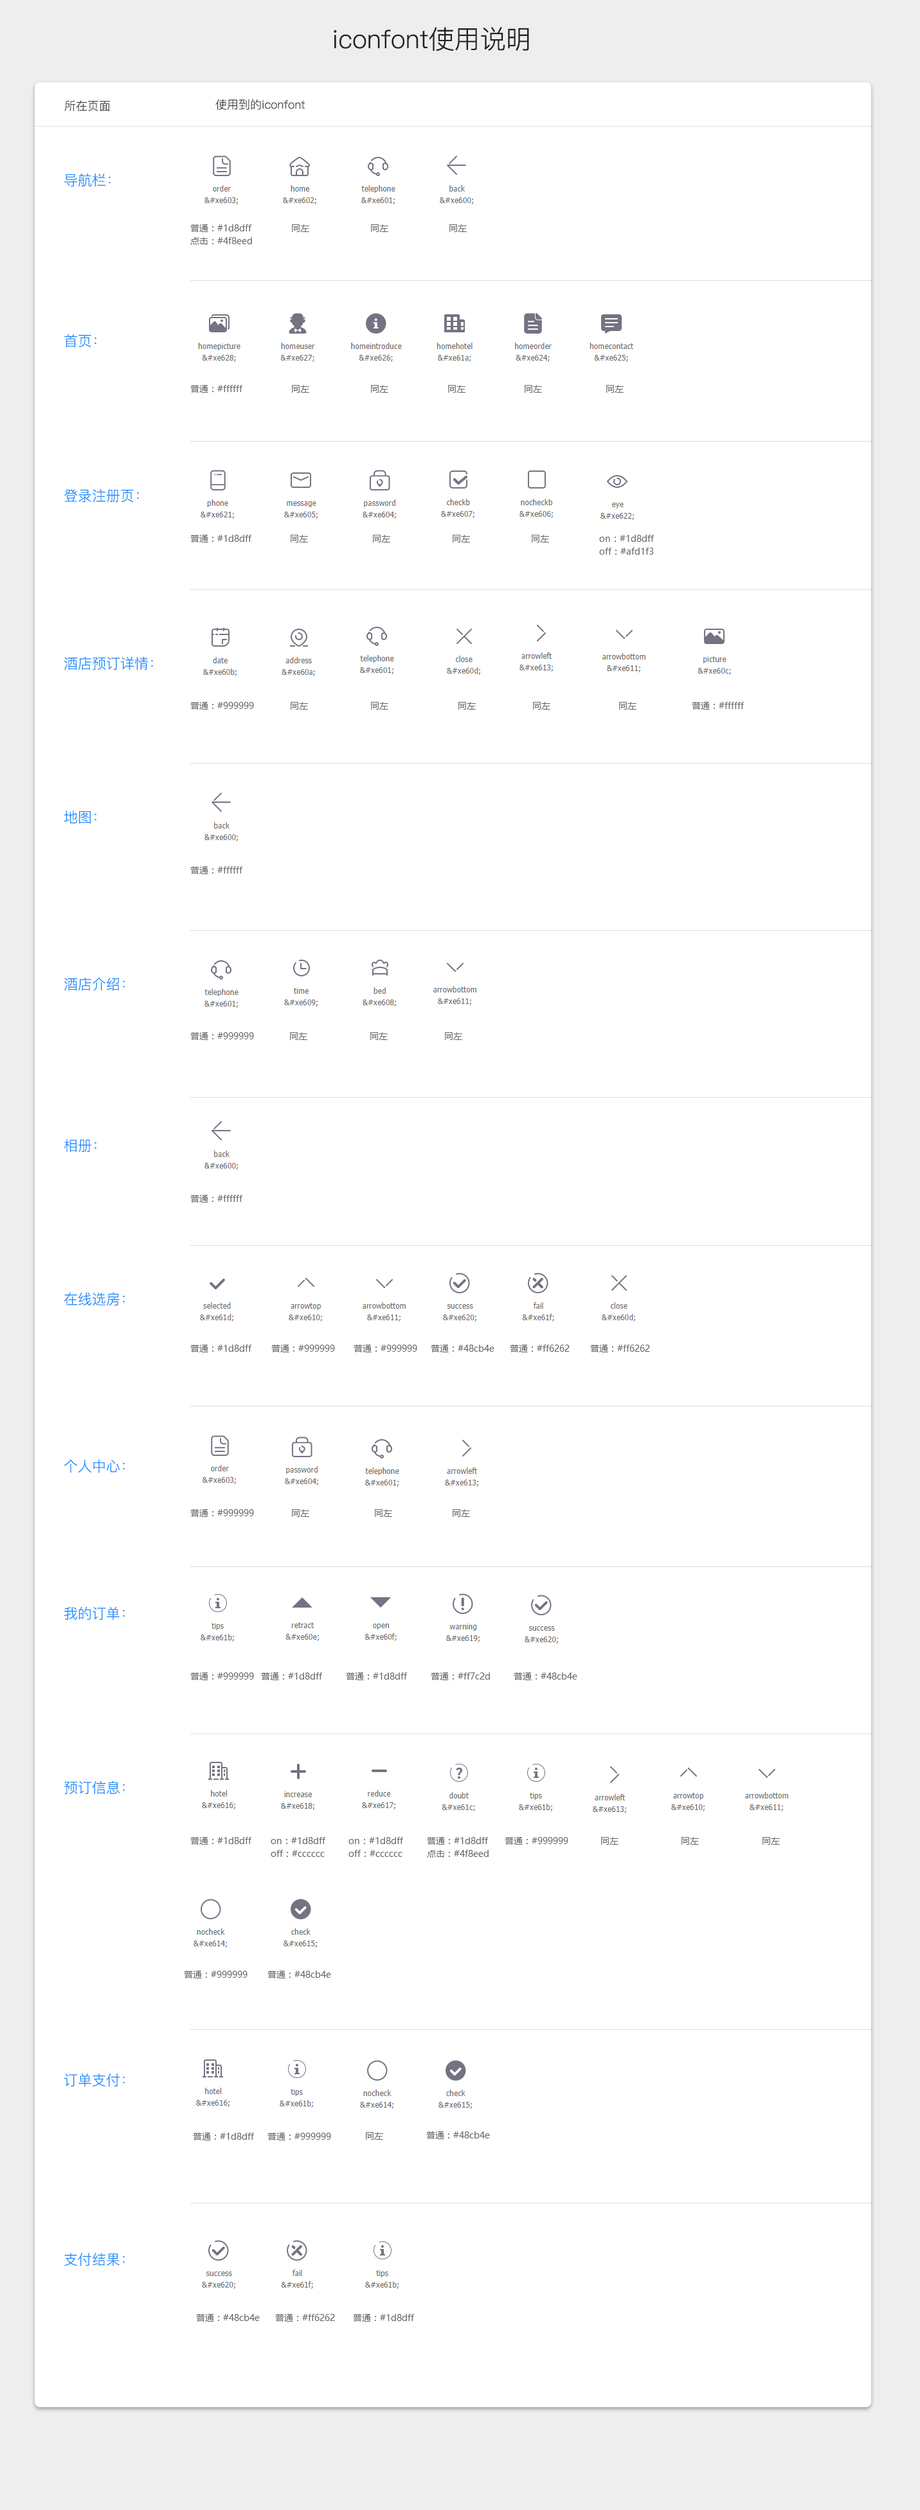
<style>
.page{position:relative;width:920px;height:2510px;background:#ffffff}
.page>*{position:absolute;margin:0}
.t1{font:25.7px "PingFang-SC-Regular";color:#222222}
.t2{font:11.6px "PingFang-SC-Regular";color:#424242}
.t3{font:14.1px "PingFang-SC-Regular";color:#1d8dff}
.t4{font:9px/12.9px "MicrosoftYaHei";color:#666666}
.t5{font:9px "MicrosoftYaHei";color:#666666}
</style>
<div class="page">
<p class="t1" style="left:334px;top:27px;width:195px;height:24px">iconfont使用说明</p>
<p class="t2" style="left:64px;top:100px;width:46px;height:11px">所在页面</p>
<p class="t2" style="left:215px;top:99px;width:90px;height:11px">使用到的iconfont</p>
<p class="t3" style="left:64px;top:173px;width:47px;height:14px">导航栏：</p>
<p class="t4" style="left:190px;top:224px;width:62px;height:21px">普通：#1d8dff<br>点击：#4f8eed</p>
<p class="t5" style="left:292px;top:224px;width:17px;height:8px">同左</p>
<p class="t5" style="left:371px;top:224px;width:17px;height:8px">同左</p>
<p class="t5" style="left:449px;top:224px;width:18px;height:8px">同左</p>
<p class="t3" style="left:64px;top:334px;width:32px;height:14px">首页：</p>
<p class="t5" style="left:190px;top:385px;width:52px;height:8px">普通：#ffffff</p>
<p class="t5" style="left:292px;top:385px;width:17px;height:8px">同左</p>
<p class="t5" style="left:371px;top:385px;width:17px;height:8px">同左</p>
<p class="t5" style="left:448px;top:385px;width:17px;height:8px">同左</p>
<p class="t5" style="left:525px;top:385px;width:17px;height:8px">同左</p>
<p class="t5" style="left:606px;top:385px;width:18px;height:8px">同左</p>
<p class="t3" style="left:64px;top:489px;width:75px;height:14px">登录注册页：</p>
<p class="t5" style="left:190px;top:535px;width:61px;height:8px">普通：#1d8dff</p>
<p class="t5" style="left:291px;top:535px;width:17px;height:8px">同左</p>
<p class="t5" style="left:373px;top:535px;width:17px;height:8px">同左</p>
<p class="t5" style="left:453px;top:535px;width:17px;height:8px">同左</p>
<p class="t5" style="left:532px;top:535px;width:17px;height:8px">同左</p>
<p class="t4" style="left:599px;top:535px;width:55px;height:20px">on：#1d8dff<br>off：#afd1f3</p>
<p class="t3" style="left:64px;top:656px;width:89px;height:14px">酒店预订详情：</p>
<p class="t5" style="left:190px;top:702px;width:64px;height:8px">普通：#999999</p>
<p class="t5" style="left:291px;top:702px;width:17px;height:8px">同左</p>
<p class="t5" style="left:371px;top:702px;width:17px;height:8px">同左</p>
<p class="t5" style="left:458px;top:702px;width:18px;height:8px">同左</p>
<p class="t5" style="left:533px;top:702px;width:17px;height:8px">同左</p>
<p class="t5" style="left:619px;top:702px;width:17px;height:8px">同左</p>
<p class="t5" style="left:692px;top:702px;width:52px;height:8px">普通：#ffffff</p>
<p class="t3" style="left:64px;top:811px;width:32px;height:13px">地图：</p>
<p class="t5" style="left:190px;top:867px;width:52px;height:7px">普通：#ffffff</p>
<p class="t3" style="left:64px;top:977px;width:61px;height:14px">酒店介绍：</p>
<p class="t5" style="left:190px;top:1032px;width:64px;height:8px">普通：#999999</p>
<p class="t5" style="left:290px;top:1032px;width:17px;height:8px">同左</p>
<p class="t5" style="left:370px;top:1032px;width:18px;height:8px">同左</p>
<p class="t5" style="left:445px;top:1032px;width:17px;height:8px">同左</p>
<p class="t3" style="left:64px;top:1139px;width:32px;height:14px">相册：</p>
<p class="t5" style="left:190px;top:1195px;width:52px;height:8px">普通：#ffffff</p>
<p class="t3" style="left:64px;top:1292px;width:61px;height:14px">在线选房：</p>
<p class="t5" style="left:190px;top:1345px;width:61px;height:8px">普通：#1d8dff</p>
<p class="t5" style="left:271px;top:1345px;width:64px;height:8px">普通：#999999</p>
<p class="t5" style="left:354px;top:1345px;width:63px;height:8px">普通：#999999</p>
<p class="t5" style="left:431px;top:1345px;width:63px;height:8px">普通：#48cb4e</p>
<p class="t5" style="left:510px;top:1345px;width:60px;height:8px">普通：#ff6262</p>
<p class="t5" style="left:590px;top:1345px;width:60px;height:8px">普通：#ff6262</p>
<p class="t3" style="left:64px;top:1459px;width:61px;height:14px">个人中心：</p>
<p class="t5" style="left:190px;top:1509px;width:64px;height:8px">普通：#999999</p>
<p class="t5" style="left:292px;top:1509px;width:17px;height:8px">同左</p>
<p class="t5" style="left:375px;top:1509px;width:17px;height:8px">同左</p>
<p class="t5" style="left:453px;top:1509px;width:17px;height:8px">同左</p>
<p class="t3" style="left:64px;top:1607px;width:61px;height:14px">我的订单：</p>
<p class="t5" style="left:190px;top:1673px;width:64px;height:7px">普通：#999999</p>
<p class="t5" style="left:261px;top:1673px;width:61px;height:7px">普通：#1d8dff</p>
<p class="t5" style="left:346px;top:1673px;width:61px;height:7px">普通：#1d8dff</p>
<p class="t5" style="left:431px;top:1673px;width:59px;height:7px">普通：#ff7c2d</p>
<p class="t5" style="left:514px;top:1673px;width:63px;height:7px">普通：#48cb4e</p>
<p class="t3" style="left:64px;top:1781px;width:61px;height:14px">预订信息：</p>
<p class="t5" style="left:190px;top:1837px;width:61px;height:8px">普通：#1d8dff</p>
<p class="t4" style="left:271px;top:1837px;width:54px;height:20px">on：#1d8dff<br>off：#cccccc</p>
<p class="t4" style="left:348px;top:1837px;width:55px;height:20px">on：#1d8dff<br>off：#cccccc</p>
<p class="t4" style="left:427px;top:1837px;width:62px;height:21px">普通：#1d8dff<br>点击：#4f8eed</p>
<p class="t5" style="left:505px;top:1837px;width:63px;height:8px">普通：#999999</p>
<p class="t5" style="left:601px;top:1837px;width:17px;height:8px">同左</p>
<p class="t5" style="left:681px;top:1837px;width:18px;height:8px">同左</p>
<p class="t5" style="left:762px;top:1837px;width:18px;height:8px">同左</p>
<p class="t5" style="left:184px;top:1971px;width:64px;height:8px">普通：#999999</p>
<p class="t5" style="left:267px;top:1971px;width:64px;height:8px">普通：#48cb4e</p>
<p class="t3" style="left:64px;top:2073px;width:61px;height:14px">订单支付：</p>
<p class="t5" style="left:193px;top:2133px;width:61px;height:8px">普通：#1d8dff</p>
<p class="t5" style="left:267px;top:2133px;width:64px;height:8px">普通：#999999</p>
<p class="t5" style="left:366px;top:2132px;width:17px;height:8px">同左</p>
<p class="t5" style="left:426px;top:2132px;width:64px;height:7px">普通：#48cb4e</p>
<p class="t3" style="left:64px;top:2253px;width:61px;height:14px">支付结果：</p>
<p class="t5" style="left:196px;top:2314px;width:64px;height:8px">普通：#48cb4e</p>
<p class="t5" style="left:275px;top:2314px;width:60px;height:8px">普通：#ff6262</p>
<p class="t5" style="left:353px;top:2314px;width:61px;height:8px">普通：#1d8dff</p>
</div>
